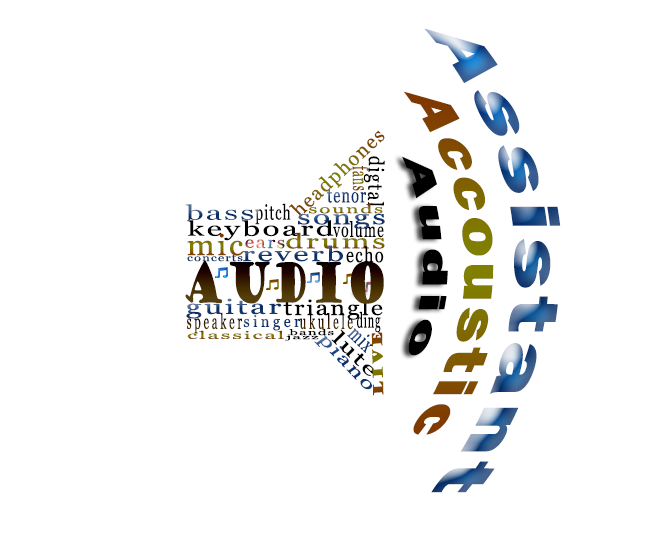
<style>
.page{position:relative;width:654px;height:540px;background:#ffffff}
.page>*{position:absolute;margin:0}
.t1{font:68.2px "FranklinGothic-Heavy";letter-spacing:0.08em;scale:1.34 1}
.t2{font:56.1px "FranklinGothic-Heavy";letter-spacing:0.08em;scale:1.17 1}
.t3{font:20.2px "Georgia";letter-spacing:0.08em;scale:0.96 1}
.t4{font:21px "Georgia";letter-spacing:0.08em;color:#000000;scale:0.83 1}
.t5{font:36.9px "FranklinGothic-Heavy";letter-spacing:0.08em;color:#000000;scale:1.78 1}
.t6{font:21.5px "Georgia";letter-spacing:0.08em;scale:0.55 1}
.t7{font:21px "Georgia";letter-spacing:0.08em;color:#13386d;scale:0.69 1}
.t8{font:20.5px "Georgia";letter-spacing:0.08em;color:#0f346a;scale:1.53 1}
.t9{font:21px "Georgia";letter-spacing:0.08em;color:#000000;scale:0.66 1}
.t10{font:12px "Georgia";letter-spacing:0.08em;color:#807800;scale:1.76 1}
.t11{font:20.5px "Georgia";letter-spacing:0.08em;color:#000000;scale:1.53 1}
.t12{font:20.5px "Georgia";letter-spacing:0.08em;scale:1.53 1}
.t13{font:29px "Georgia";letter-spacing:0.08em;color:#806d00;scale:1.09 1}
.t14{font:16.8px "Georgia";letter-spacing:0.08em;scale:1.17 1}
.t15{font:21px "Georgia";letter-spacing:0.08em;color:#000000;scale:0.78 1}
.t16{font:9.6px "Georgia";letter-spacing:0.08em;color:#0c3169;scale:1.37 1}
.t17{font:54.5px "GoudyStout";letter-spacing:0.08em;scale:0.6 1}
.t18{font:21px "Georgia";letter-spacing:0.08em;color:#000000;scale:1.19 1}
.t19{font:21px "Georgia";letter-spacing:0.24em;scale:0.54 1}
.t20{font:16px "Georgia";letter-spacing:0.24em;color:#0f346a;scale:0.9 1}
.t21{font:21px "Georgia";letter-spacing:0.08em;color:#000000;scale:0.52 1}
.t22{font:8px "Georgia";letter-spacing:0.08em;color:#000000;scale:1.87 1}
.t23{font:18.8px "Georgia";letter-spacing:0.08em;color:#000000;scale:1.49 1}
.t24{font:21.3px "Georgia";letter-spacing:0.08em;scale:0.66 1}
.t25{font:10.4px "Georgia";letter-spacing:0.08em;scale:2.17 1}
.t26{font:6.1px "Georgia";letter-spacing:0.08em;color:#000000;scale:2.77 1}
.t27{font:17.4px "Georgia";letter-spacing:0.08em;color:#103670;scale:1.48 1}
.t28{font:13.6px "GoudyStout";letter-spacing:0.08em}
</style>
<div class="page">
<p class="t1" style="left:424px;top:28px;width:137px;height:465px;rotate:90deg">Assistant</p>
<p class="t2" style="left:404px;top:91px;width:90px;height:344px;rotate:90deg">Accoustic</p>
<p class="t3" style="left:289px;top:130px;width:96px;height:88px;rotate:-43deg">headphones</p>
<p class="t4" style="left:363px;top:156px;width:22px;height:51px;rotate:91deg">digtal</p>
<p class="t5" style="left:402px;top:156px;width:46px;height:200px;rotate:90deg">Audio</p>
<p class="t6" style="left:352px;top:166px;width:17px;height:25px;rotate:89deg">fans</p>
<p class="t7" style="left:327px;top:189px;width:39px;height:14px">tenor</p>
<p class="t8" style="left:185px;top:204px;width:68px;height:17px">bass</p>
<p class="t9" style="left:255px;top:203px;width:36px;height:22px">pitch</p>
<p class="t10" style="left:309px;top:204px;width:74px;height:10px">sounds</p>
<p class="t11" style="left:187px;top:220px;width:147px;height:21px">keyboard</p>
<p class="t12" style="left:298px;top:214px;width:87px;height:15px">songs</p>
<p class="t9" style="left:333px;top:221px;width:51px;height:17px">volume</p>
<p class="t13" style="left:187px;top:233px;width:57px;height:23px">mic</p>
<p class="t12" style="left:286px;top:232px;width:99px;height:17px">drums</p>
<p class="t12" style="left:242px;top:245px;width:101px;height:17px">reverb</p>
<p class="t14" style="left:245px;top:239px;width:40px;height:10px;rotate:1deg">ears</p>
<p class="t15" style="left:346px;top:246px;width:38px;height:17px">echo</p>
<p class="t16" style="left:187px;top:255px;width:56px;height:7px">concerts</p>
<p class="t17" style="left:185px;top:260px;width:199px;height:44px">AUDIO</p>
<p class="t12" style="left:186px;top:298px;width:96px;height:21px">guitar</p>
<p class="t18" style="left:283px;top:299px;width:100px;height:21px">triangle</p>
<p class="t19" style="left:187px;top:312px;width:166px;height:22px">speaker          ukulele</p>
<p class="t20" style="left:243px;top:315px;width:58px;height:16px">singer</p>
<p class="t21" style="left:356px;top:311px;width:25px;height:22px">ding</p>
<p class="t22" style="left:289px;top:329px;width:45px;height:7px">bands</p>
<p class="t23" style="left:331px;top:329px;width:43px;height:47px;rotate:45deg">lute</p>
<p class="t24" style="left:347px;top:328px;width:26px;height:25px;rotate:44deg">mix</p>
<p class="t25" style="left:187px;top:330px;width:97px;height:9px">classical</p>
<p class="t26" style="left:285px;top:334px;width:34px;height:7px">jazz</p>
<p class="t27" style="left:314px;top:334px;width:58px;height:56px;rotate:46deg">piano</p>
<p class="t28" style="left:371px;top:332px;width:13px;height:64px;rotate:-91deg">live</p>
</div>
